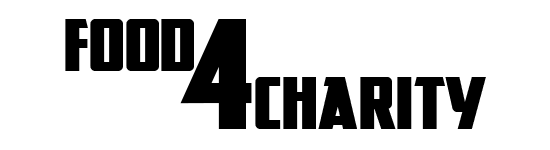
<style>
.page{position:relative;width:550px;height:150px;background:#ffffff}
.page>*{position:absolute;margin:0}
.t1{font:72px "GreatLakesNF";color:#000000}
.t2{font:129.5px "GreatLakesNF";color:#000000}
</style>
<div class="page">
<p class="t1" style="left:65px;top:19px;width:129px;height:52px">food</p>
<p class="t2" style="left:180px;top:19px;width:72px;height:110px">4</p>
<p class="t1" style="left:255px;top:77px;width:231px;height:52px">charity</p>
</div>
